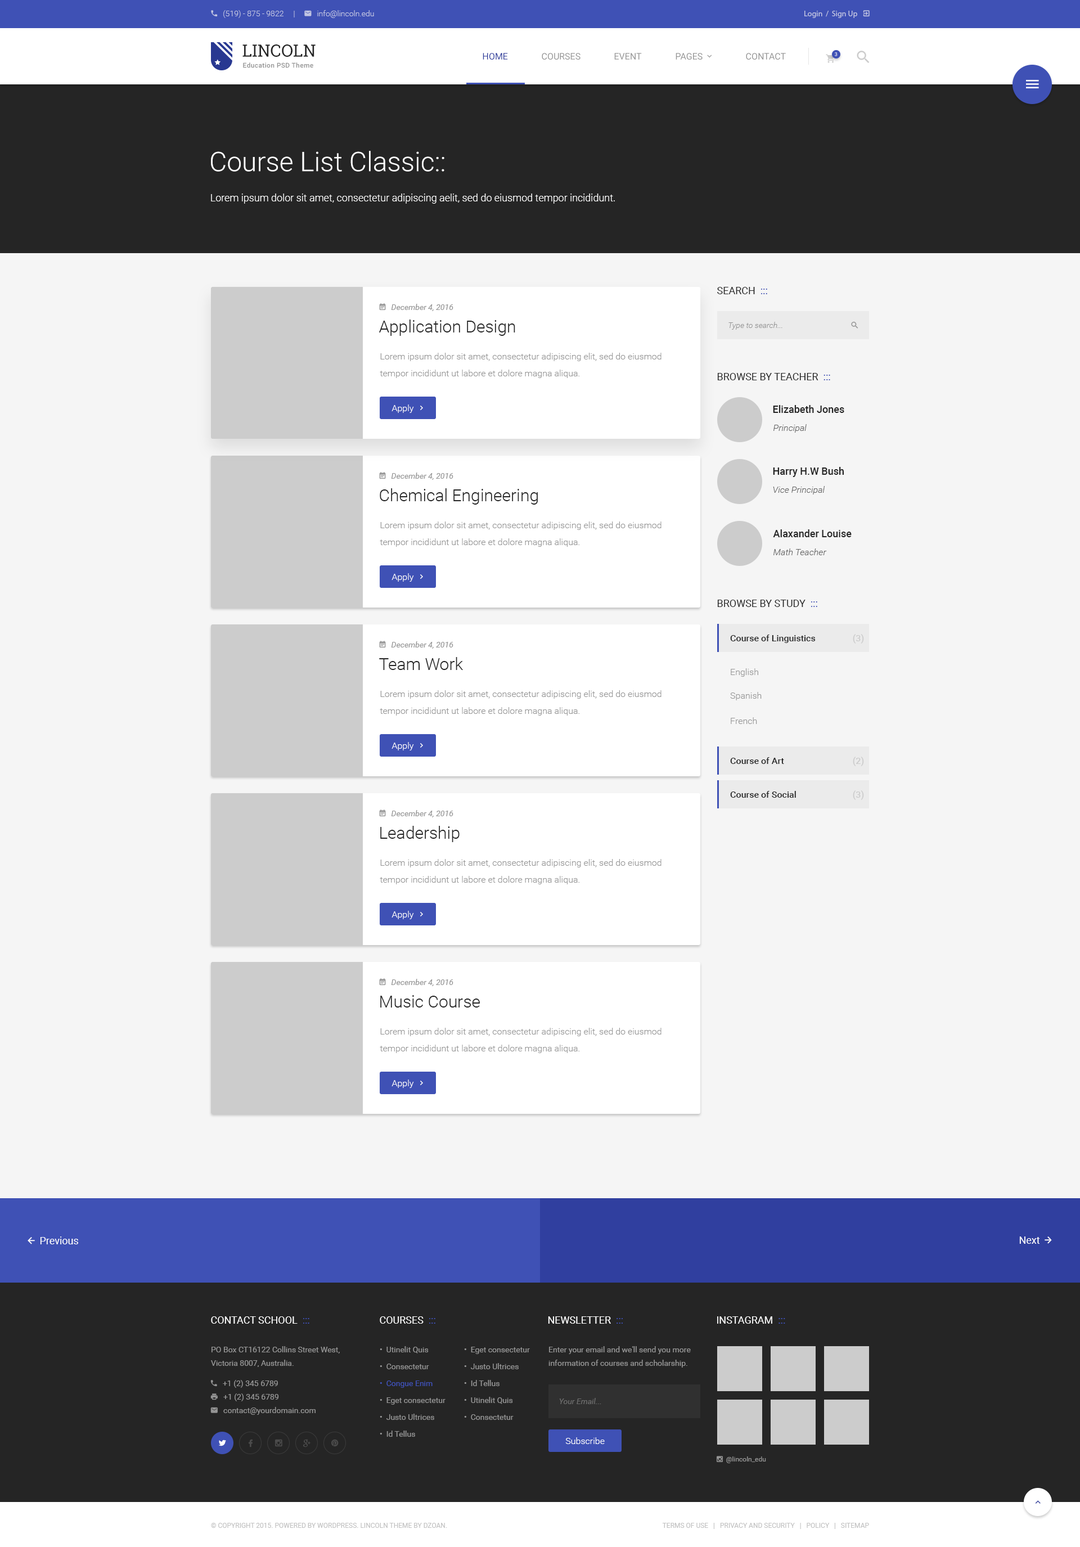
<style>
.page{position:relative;width:1080px;height:1547px;background:#f5f5f5}
.page>*{position:absolute;margin:0}
.t1{font:16.9px "RobotoSlab-Regular";color:#252525;text-transform:uppercase}
.t2{font:9px "Roboto-Regular";color:#303f9f;text-transform:uppercase}
.t3{font:9px "Roboto-Regular";color:#959595;text-transform:uppercase}
.t4{font:5.1px "Roboto-Regular";text-transform:uppercase}
.t5{font:6.8px "Roboto-Medium";letter-spacing:0.03em;color:#959595}
.t6{font:27px "Roboto-Light";color:#ffffff}
.t7{font:10.1px "Roboto-Light";color:#ffffff}
.t8{font:10.1px "Roboto-Regular";color:#252525;text-transform:uppercase}
.t9{font:10.1px "Roboto-Regular";color:#3f51b5;text-transform:uppercase}
.t10{font:16.9px "Roboto-Light";color:#252525}
.t11{font:7.9px "Roboto-LightItalic";color:#959595}
.t12{font:9px/16.9px "Roboto-Light";color:#959595}
.t13{font:10.1px "Roboto-Medium";color:#252525}
.t14{font:9px "Roboto-LightItalic";color:#636363}
.t15{font:9px "Roboto-Medium";color:#252525}
.t16{font:9px "Roboto-Medium";color:#cccccc}
.t17{font:9px "Roboto-Light";color:#959595}
.t18{font:10.1px "Roboto-Regular";color:#ffffff;text-transform:uppercase}
.t19{font:7.9px/16.9px "Roboto-Regular";color:#959595}
.t20{font:7.9px/16.9px "Roboto-Regular";color:#3f51b5}
.t21{font:7.9px/13.5px "Roboto-Regular";color:#959595}
.t22{font:7.9px "Roboto-Italic";color:#6c6c6c}
.t23{font:9px "Roboto-Light";color:#ffffff}
.t24{font:6.8px "Roboto-Regular";color:#c2c2c2;text-transform:uppercase}
</style>
<div class="page">
<p class="t1" style="left:242px;top:44px;width:74px;height:13px">Lincoln</p>
<p class="t2" style="left:483px;top:53px;width:25px;height:7px">Home</p>
<p class="t3" style="left:542px;top:53px;width:38px;height:7px">Courses</p>
<p class="t3" style="left:614px;top:53px;width:28px;height:7px">Event</p>
<p class="t3" style="left:746px;top:53px;width:40px;height:7px">Contact</p>
<p class="t4" style="left:835px;top:52px;width:3px;height:4px">3</p>
<p class="t5" style="left:243px;top:62px;width:70px;height:6px">Education PSD Theme</p>
<p class="t6" style="left:211px;top:151px;width:233px;height:21px">Course List Classic::</p>
<p class="t7" style="left:211px;top:194px;width:404px;height:10px">Lorem ipsum dolor sit amet, consectetur adipiscing aelit, sed do eiusmod tempor incididunt.</p>
<p class="t8" style="left:717px;top:287px;width:50px;height:7px">Search  <span class="t9">:::</span></p>
<p class="t10" style="left:379px;top:320px;width:136px;height:16px">Application Design</p>
<p class="t11" style="left:728px;top:322px;width:54px;height:8px">Type to search...</p>
<p class="t12" style="left:380px;top:353px;width:282px;height:25px">Lorem ipsum dolor sit amet, consectetur adipiscing elit, sed do eiusmod tempor incididunt ut labore et dolore magna aliqua.</p>
<p class="t8" style="left:717px;top:373px;width:113px;height:7px">Browse by Teacher  <span class="t9">:::</span></p>
<p class="t13" style="left:773px;top:405px;width:71px;height:8px">Elizabeth Jones</p>
<p class="t14" style="left:773px;top:424px;width:34px;height:9px">Principal</p>
<p class="t13" style="left:773px;top:467px;width:71px;height:10px">Harry H.W Bush</p>
<p class="t14" style="left:773px;top:486px;width:52px;height:8px">Vice Principal</p>
<p class="t10" style="left:380px;top:488px;width:158px;height:17px">Chemical Engineering</p>
<p class="t12" style="left:380px;top:521px;width:282px;height:26px">Lorem ipsum dolor sit amet, consectetur adipiscing elit, sed do eiusmod tempor incididunt ut labore et dolore magna aliqua.</p>
<p class="t13" style="left:773px;top:529px;width:79px;height:8px">Alaxander Louise</p>
<p class="t14" style="left:773px;top:548px;width:54px;height:7px">Math Teacher</p>
<p class="t8" style="left:717px;top:600px;width:100px;height:7px">Browse by Study  <span class="t9">:::</span></p>
<p class="t15" style="left:730px;top:634px;width:86px;height:9px">Course of Linguistics</p>
<p class="t16" style="left:853px;top:634px;width:11px;height:10px">(3)</p>
<p class="t10" style="left:379px;top:657px;width:85px;height:13px">Team Work</p>
<p class="t17" style="left:731px;top:668px;width:27px;height:9px">English</p>
<p class="t12" style="left:380px;top:690px;width:282px;height:26px">Lorem ipsum dolor sit amet, consectetur adipiscing elit, sed do eiusmod tempor incididunt ut labore et dolore magna aliqua.</p>
<p class="t17" style="left:730px;top:692px;width:32px;height:8px">Spanish</p>
<p class="t17" style="left:731px;top:717px;width:26px;height:7px">French</p>
<p class="t15" style="left:730px;top:757px;width:54px;height:7px">Course of Art</p>
<p class="t16" style="left:853px;top:757px;width:11px;height:9px">(2)</p>
<p class="t15" style="left:730px;top:791px;width:66px;height:7px">Course of Social</p>
<p class="t16" style="left:853px;top:790px;width:11px;height:10px">(3)</p>
<p class="t10" style="left:380px;top:826px;width:80px;height:16px">Leadership</p>
<p class="t12" style="left:380px;top:859px;width:282px;height:25px">Lorem ipsum dolor sit amet, consectetur adipiscing elit, sed do eiusmod tempor incididunt ut labore et dolore magna aliqua.</p>
<p class="t10" style="left:380px;top:995px;width:100px;height:12px">Music Course</p>
<p class="t12" style="left:380px;top:1028px;width:282px;height:25px">Lorem ipsum dolor sit amet, consectetur adipiscing elit, sed do eiusmod tempor incididunt ut labore et dolore magna aliqua.</p>
<p class="t18" style="left:211px;top:1316px;width:98px;height:8px">Contact School  <span class="t9">:::</span></p>
<p class="t18" style="left:380px;top:1316px;width:55px;height:8px">Courses  <span class="t9">:::</span></p>
<p class="t18" style="left:548px;top:1316px;width:75px;height:8px">Newsletter  <span class="t9">:::</span></p>
<p class="t18" style="left:717px;top:1316px;width:68px;height:8px">Instagram  <span class="t9">:::</span></p>
<p class="t19" style="left:380px;top:1346px;width:66px;height:91px">•  Utinelit Quis<br>•  Consectetur<br><span class="t20">•  Congue Enim<br></span>•  Eget consectetur<br>•  Justo Ultrices<br>•  Id Tellus</p>
<p class="t19" style="left:464px;top:1347px;width:66px;height:73px">•  Eget consectetur<br>•  Justo Ultrices<br>•  Id Tellus<br>•  Utinelit Quis<br>•  Consectetur</p>
<p class="t21" style="left:548px;top:1346px;width:143px;height:21px">Enter your email and we'll send you more information of courses and scholarship.</p>
<p class="t22" style="left:559px;top:1398px;width:42px;height:6px">Your Email...</p>
<p class="t23" style="left:565px;top:1437px;width:40px;height:7px">Subscribe</p>
<p class="t24" style="left:211px;top:1523px;width:236px;height:5px">© Copyright 2015. Powered by WordPress. Lincoln Theme by DZOAN.</p>
<p class="t24" style="left:662px;top:1523px;width:207px;height:6px">Terms of Use   |   Privacy and Security   |   Policy   |   Sitemap</p>
</div>
